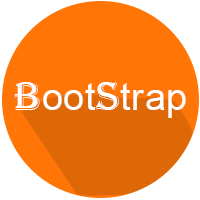
<style>
.page{position:relative;width:200px;height:200px;background:#ff7607}
.page>*{position:absolute;margin:0}
.t1{font:37.5px "ArialMT";letter-spacing:0.02em;color:#ffffff}
.t2{font:41.7px "Algerian";letter-spacing:0.02em;color:#ffffff}
</style>
<div class="page">
<p class="t1" style="left:14px;top:82px;width:172px;height:36px"><span class="t2">b</span>oot<span class="t2">s</span>trap</p>
</div>
